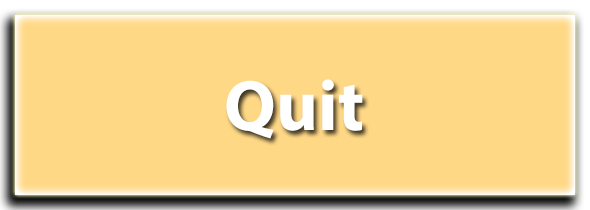
<style>
.page{position:relative;width:590px;height:210px;background:#ffd886}
.page>*{position:absolute;margin:0}
.t1{font:72px "MyriadPro-Bold";color:#ffffff}
</style>
<div class="page">
<p class="t1" style="left:226px;top:79px;width:137px;height:60px">Quit</p>
</div>
